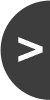
<style>
.page{position:relative;width:50px;height:100px;background:#3d3d3d}
.page>*{position:absolute;margin:0}
.t1{font:48px "HelveticaNeue-Bold";letter-spacing:0.005em;color:#ffffff}
</style>
<div class="page">
<p class="t1" style="left:18px;top:37px;width:25px;height:25px">&gt;</p>
</div>
